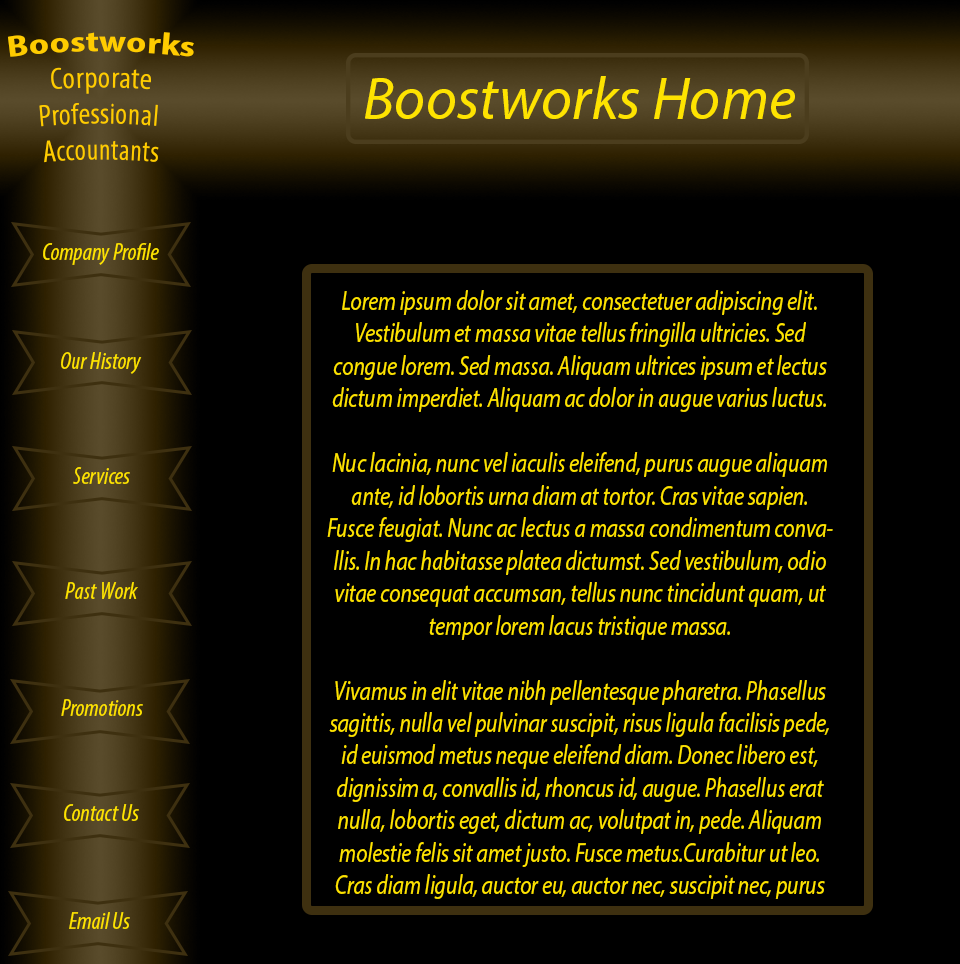
<style>
.page{position:relative;width:960px;height:964px;background:#000000}
.page>*{position:absolute;margin:0}
.t1{font:30px "MyriadPro-Cond";color:#ffcc00}
.t2{font:30px "MyriadPro-Bold";color:#ffcc00}
.t3{font:60px "MyriadPro-It";color:#fee300}
.t4{font:24px "MyriadPro-CondIt";color:#fee300}
.t5{font:27.1px "MyriadPro-It";color:#fee300;scale:0.79 1}
</style>
<div class="page">
<p class="t1" style="left:7px;top:32px;width:187px;height:131px;text-align:center"><span class="t2">Boostworks<br></span>Corporate<br>Professional <br>Accountants</p>
<p class="t3" style="left:365px;top:76px;width:430px;height:43px">Boostworks Home</p>
<p class="t4" style="left:43px;top:243px;width:116px;height:22px">Company Profile</p>
<p class="t5" style="left:327px;top:290px;width:506px;height:609px;text-align:center">Lorem ipsum dolor sit amet, consectetuer adipiscing elit. Vestibulum et massa vitae tellus fringilla ultricies. Sed congue lorem. Sed massa. Aliquam ultrices ipsum et lectus dictum imperdiet. Aliquam ac dolor in augue varius luctus.<br><br>Nuc lacinia, nunc vel iaculis eleifend, purus augue aliquam ante, id lobortis urna diam at tortor. Cras vitae sapien. Fusce feugiat. Nunc ac lectus a massa condimentum convallis. In hac habitasse platea dictumst. Sed vestibulum, odio vitae consequat accumsan, tellus nunc tincidunt quam, ut tempor lorem lacus tristique massa.<br><br>Vivamus in elit vitae nibh pellentesque pharetra. Phasellus sagittis, nulla vel pulvinar suscipit, risus ligula facilisis pede, id euismod metus neque eleifend diam. Donec libero est, dignissim a, convallis id, rhoncus id, augue. Phasellus erat nulla, lobortis eget, dictum ac, volutpat in, pede. Aliquam molestie felis sit amet justo. Fusce metus.Curabitur ut leo. Cras diam ligula, auctor eu, auctor nec, suscipit nec, purus</p>
<p class="t4" style="left:61px;top:352px;width:81px;height:22px">Our History</p>
<p class="t4" style="left:73px;top:467px;width:57px;height:17px">Services</p>
<p class="t4" style="left:65px;top:582px;width:73px;height:17px">Past Work</p>
<p class="t4" style="left:61px;top:699px;width:82px;height:17px">Promotions</p>
<p class="t4" style="left:64px;top:804px;width:75px;height:17px">Contact Us</p>
<p class="t4" style="left:69px;top:912px;width:61px;height:17px">Email Us</p>
</div>
